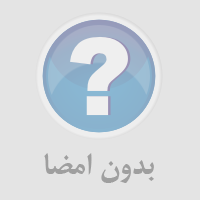
<style>
.page{position:relative;width:200px;height:200px;background:#e4e4e4}
.page>*{position:absolute;margin:0}
.t1{font:32px "BMitraBold";color:#9f9f9f}
</style>
<div class="page">
<p class="t1" style="left:44px;top:153px;width:110px;height:30px">بدون امضا</p>
</div>
